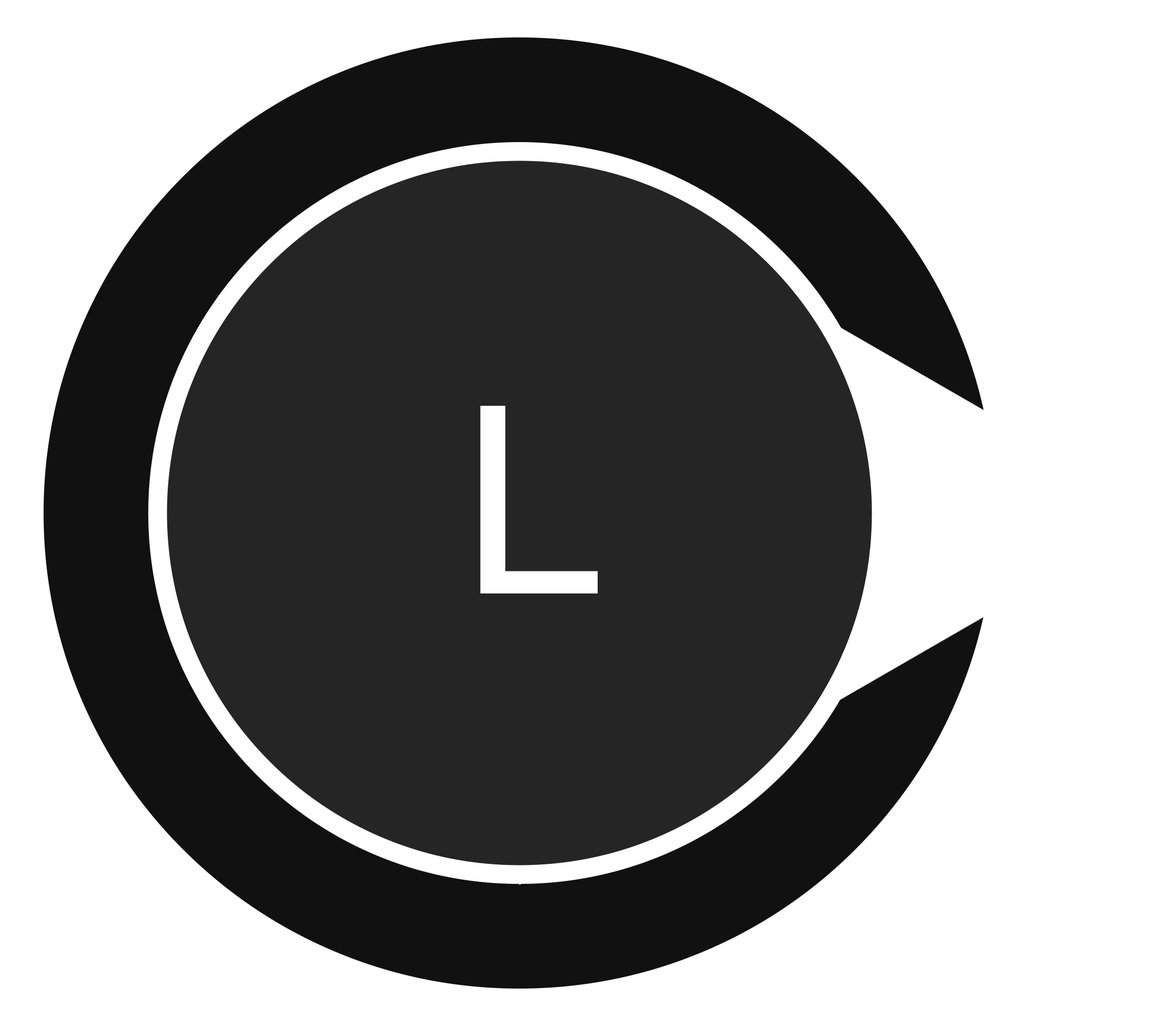
<style>
.page{position:relative;width:1163px;height:1026px;background:#ffffff}
.page>*{position:absolute;margin:0}
.t1{font:261.9px "ArialMT";color:#ffffff}
</style>
<div class="page">
<p class="t1" style="left:480px;top:406px;width:117px;height:187px">L</p>
</div>
